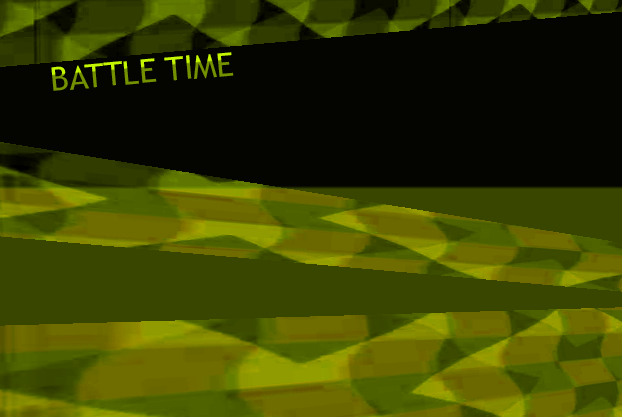
<style>
.page{position:relative;width:622px;height:417px;background:#040500}
.page>*{position:absolute;margin:0}
.t1{font:32.5px "TrebuchetMS"}
</style>
<div class="page">
<p class="t1" style="left:51px;top:52px;width:183px;height:39px;rotate:-5deg">BATTLE TIME</p>
</div>
